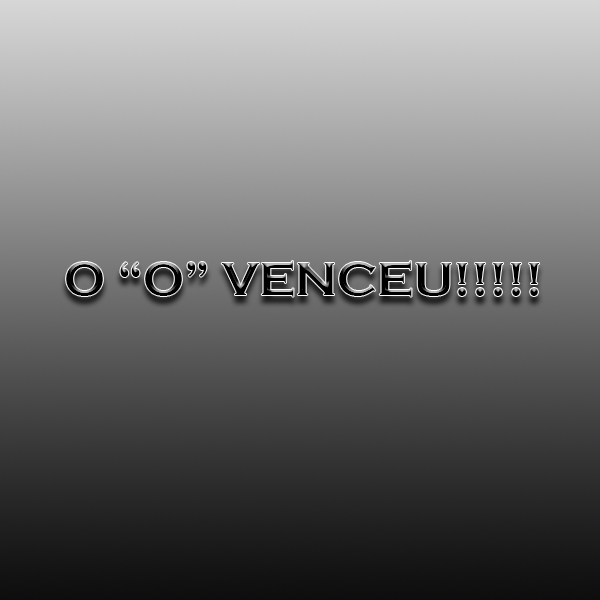
<style>
.page{position:relative;width:600px;height:600px}
.page>*{position:absolute;margin:0}
.t1{font:48px "CopperplateGothic-Bold";color:#000000}
</style>
<div class="page">
<p class="t1" style="left:66px;top:261px;width:473px;height:36px">O “O” VENCEU!!!!!</p>
</div>
